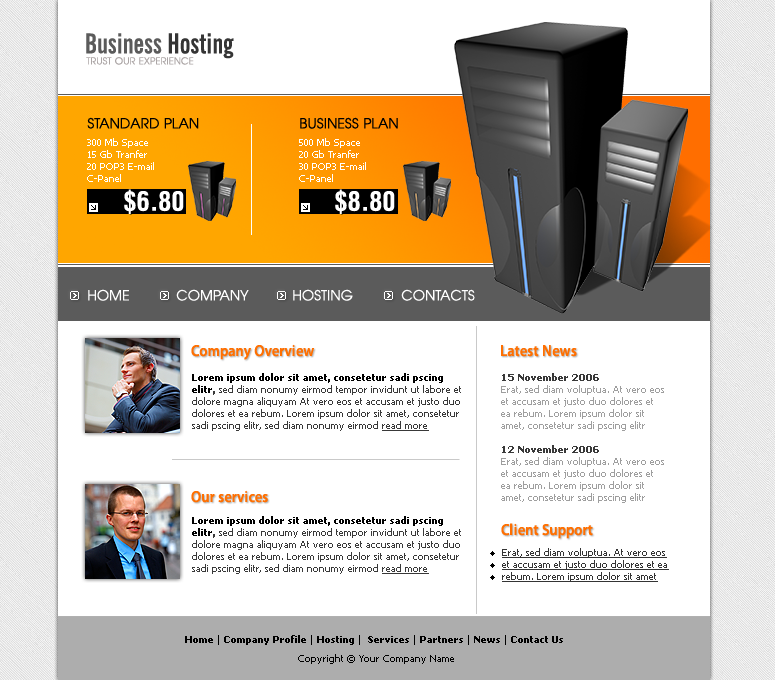
<style>
.page{position:relative;width:775px;height:680px;background:#ffffff}
.page>*{position:absolute;margin:0}
.t1{font:27.5px "NewsGothicBT-BoldExtraCondensed";color:#5b5b5b}
.t2{font:27.5px "NewsGothicBT-BoldExtraCondensed";color:#353535}
.t3{font:9.6px "Avian";color:#aca6a6;text-transform:uppercase}
.t4{font:14px "Avian";color:#000000;text-transform:uppercase}
.t5{font:10px "Tahoma";color:#ffffff}
.t6{font:26px "HelveticaLTStd-BoldCond";color:#ffffff;text-transform:uppercase}
.t7{font:14px "Avian";color:#ffffff;text-transform:uppercase}
.t8{font:16px "MyriadPro-Semibold";letter-spacing:0.02em;color:#ff6f00;scale:0.9 1}
.t9{font:10px "Tahoma";color:#393939}
.t10{font:10px "Tahoma-Bold";color:#000000}
.t11{font:10px "Tahoma-Bold";color:#393939}
.t12{font:10px "Tahoma";color:#393939;text-decoration:underline}
.t13{font:10px "Tahoma";color:#9e9e9e}
.t14{font:10px "Tahoma";color:#343434;text-decoration:underline}
.t15{font:10px "Tahoma";color:#000000}
</style>
<div class="page">
<p class="t1" style="left:86px;top:33px;width:148px;height:26px">Business<span class="t2"> Hosting</span></p>
<p class="t3" style="left:86px;top:57px;width:108px;height:8px">TRUST OUR EXPERIENCE</p>
<p class="t4" style="left:87px;top:117px;width:112px;height:12px">standard plan</p>
<p class="t4" style="left:300px;top:117px;width:98px;height:12px">business plan</p>
<p class="t5" style="left:87px;top:138px;width:67px;height:44px">300 Mb Space<br>15 Gb Tranfer<br>20 POP3 E-mail<br>C-Panel</p>
<p class="t5" style="left:299px;top:138px;width:67px;height:44px">500 Mb Space<br>20 Gb Tranfer<br>30 POP3 E-mail<br>C-Panel</p>
<p class="t6" style="left:124px;top:189px;width:60px;height:25px">$6.80</p>
<p class="t6" style="left:335px;top:189px;width:60px;height:25px">$8.80</p>
<p class="t7" style="left:88px;top:289px;width:41px;height:12px">home</p>
<p class="t7" style="left:176px;top:289px;width:73px;height:12px">company</p>
<p class="t7" style="left:293px;top:289px;width:60px;height:12px">hosting</p>
<p class="t7" style="left:401px;top:289px;width:74px;height:12px">contacts</p>
<p class="t8" style="left:191px;top:344px;width:123px;height:16px">Company Overview</p>
<p class="t8" style="left:501px;top:345px;width:76px;height:12px">Latest News</p>
<p class="t9" style="left:192px;top:373px;width:269px;height:58px"><span class="t10">Lorem ipsum dolor sit amet, consetetur sadi pscing elitr</span><span class="t11">,</span> sed diam nonumy eirmod tempor invidunt ut labore et dolore magna aliquyam At vero eos et accusam et justo duo dolores et ea rebum. Lorem ipsum dolor sit amet, consetetur sadi pscing elitr, sed diam nonumy eirmod <span class="t12">read more</span></p>
<p class="t13" style="left:501px;top:373px;width:163px;height:130px"><span class="t11">15 November 2006<br></span>Erat, sed diam voluptua. At vero eos et accusam et justo duo dolores et ea rebum. Lorem ipsum dolor sit amet, consetetur sadi pscing elitr<br><br><span class="t11">12 November 2006<br></span>Erat, sed diam voluptua. At vero eos et accusam et justo duo dolores et ea rebum. Lorem ipsum dolor sit amet, consetetur sadi pscing elitr</p>
<p class="t8" style="left:191px;top:490px;width:77px;height:13px">Our services</p>
<p class="t9" style="left:192px;top:516px;width:269px;height:58px"><span class="t10">Lorem ipsum dolor sit amet, consetetur sadi pscing elitr</span><span class="t11">,</span> sed diam nonumy eirmod tempor invidunt ut labore et dolore magna aliquyam At vero eos et accusam et justo duo dolores et ea rebum. Lorem ipsum dolor sit amet, consetetur sadi pscing elitr, sed diam nonumy eirmod <span class="t12">read more</span></p>
<p class="t8" style="left:501px;top:523px;width:92px;height:16px">Client Support</p>
<p class="t14" style="left:502px;top:548px;width:167px;height:34px">Erat, sed diam voluptua. At vero eos et accusam et justo duo dolores et ea rebum. Lorem ipsum dolor sit amet</p>
<p class="t10" style="left:185px;top:635px;width:378px;height:10px"><span class="t15">  </span>Home<span class="t15"> | </span>Company Profile <span class="t15">| </span>Hosting <span class="t15">| </span> Services <span class="t15">| </span>Partners <span class="t15">| </span>News <span class="t15">| </span>Contact Us</p>
<p class="t15" style="left:298px;top:654px;width:156px;height:10px">Copyright © Your Company Name</p>
</div>
